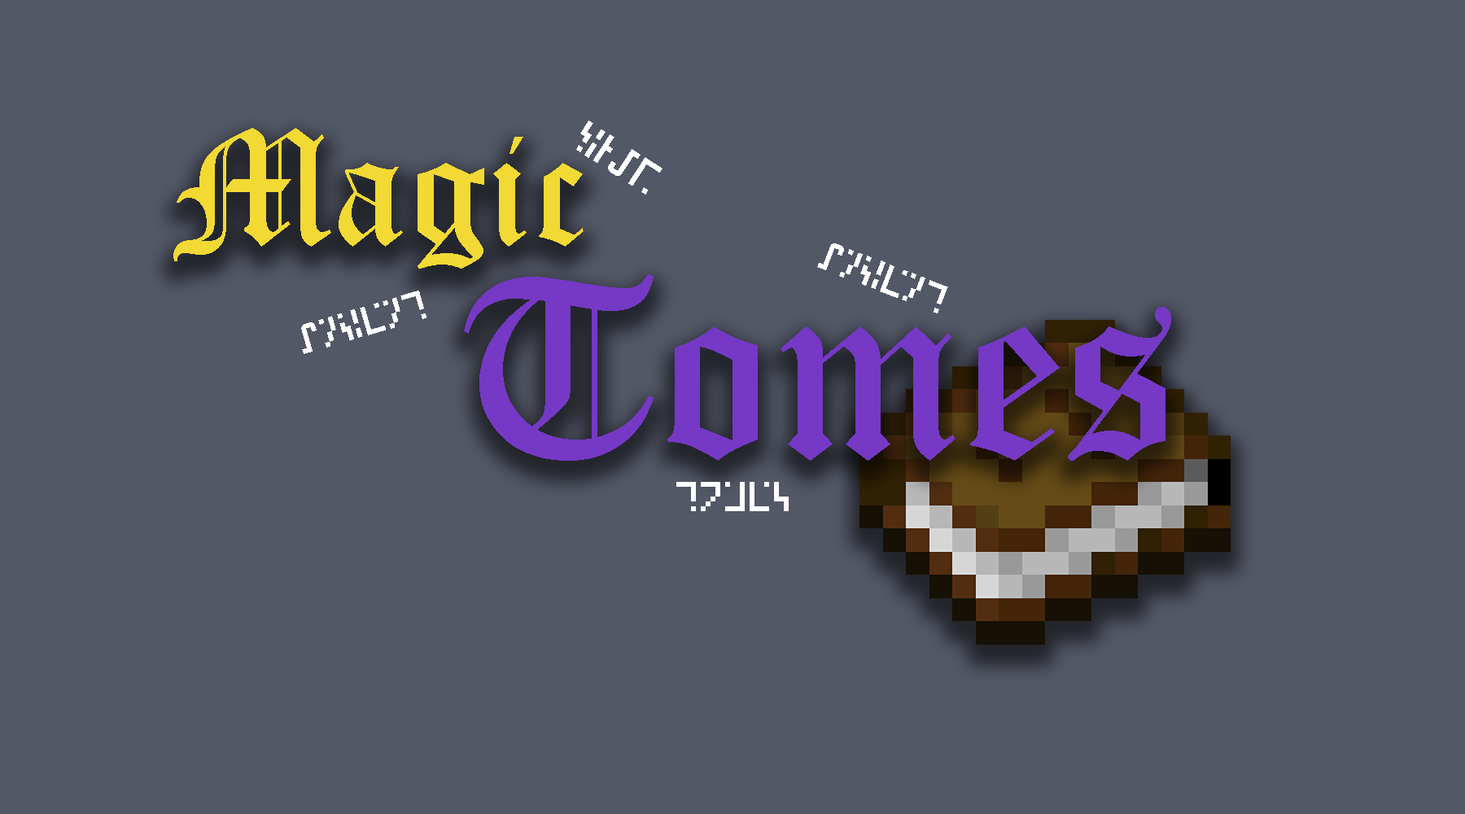
<style>
.page{position:relative;width:1465px;height:814px;background:#535867}
.page>*{position:absolute;margin:0}
.t1{font:41.5px "minecraft-enchantment";color:#ffffff}
.t2{font:160.4px "OldEnglishTextMT";color:#f2d933}
.t3{font:38.2px "minecraft-enchantment";color:#ffffff}
.t4{font:256.7px "OldEnglishTextMT";color:#7539c6}
.t5{font:39.1px "minecraft-enchantment";color:#ffffff}
</style>
<div class="page">
<p class="t1" style="left:576px;top:120px;width:87px;height:75px;rotate:-147deg">magic</p>
<p class="t2" style="left:173px;top:128px;width:411px;height:141px">Magic</p>
<p class="t3" style="left:817px;top:243px;width:131px;height:70px;rotate:21deg">ancient</p>
<p class="t4" style="left:464px;top:273px;width:707px;height:188px">Tomes</p>
<p class="t3" style="left:301px;top:291px;width:125px;height:63px;rotate:-16deg">ancient</p>
<p class="t5" style="left:676px;top:482px;width:113px;height:29px">tomes</p>
</div>
